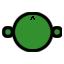
<style>
.page{position:relative;width:64px;height:64px;background:#ffffff}
.page>*{position:absolute;margin:0}
.t1{font:10.8px "Calibri-Bold";color:#000000;scale:1.05 1}
</style>
<div class="page">
<p class="t1" style="left:30px;top:16px;width:5px;height:4px">^</p>
</div>
